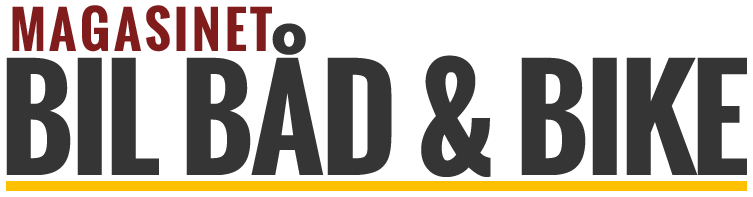
<style>
.page{position:relative;width:753px;height:197px;background:#ffffff}
.page>*{position:absolute;margin:0}
.t1{font:50px "Oswald-Bold";letter-spacing:0.075em;color:#801c1c}
.t2{font:133.3px "Oswald-Bold";letter-spacing:-0.025em;color:#353535}
.t3{font:75px "Oswald-Bold";letter-spacing:0.075em;color:#474747}
</style>
<div class="page">
<p class="t1" style="left:12px;top:5px;width:260px;height:47px">MAGASINET</p>
<p class="t2" style="left:6px;top:23px;width:741px;height:154px"><span class="t3"><br></span>BIL BÅD &amp; BIKE</p>
</div>
